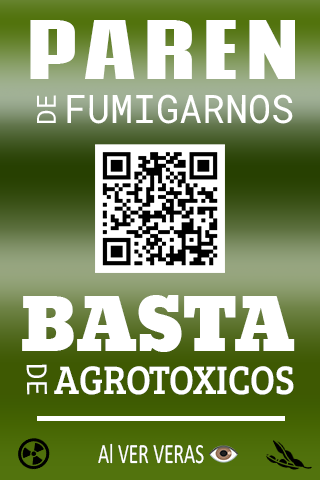
<style>
.page{position:relative;width:320px;height:480px;background:#ffffff}
.page>*{position:absolute;margin:0}
.t1{font:75.6px "CodaCaption-ExtraBold";color:#ffffff}
.t2{font:26.1px "RobotoMono-Regular";color:#ffffff}
.t3{font:39.2px "RobotoMono-Regular";color:#ffffff}
.t4{font:71.1px "Moul-Regular";color:#ffffff}
.t5{font:27.8px "RobotoMono-Regular";color:#ffffff}
.t6{font:41.1px "BreeSerif-Regular";color:#ffffff;scale:0.91 1}
.t7{font:28.1px "Calibri";color:#ffffff;scale:0.69 1}
</style>
<div class="page">
<p class="t1" style="left:30px;top:20px;width:265px;height:59px">PAREN</p>
<p class="t2" style="left:37px;top:95px;width:19px;height:28px;rotate:-90deg">DE</p>
<p class="t3" style="left:67px;top:94px;width:226px;height:30px">FUMIGARNOS</p>
<p class="t4" style="left:22px;top:295px;width:273px;height:57px">BASTA</p>
<p class="t5" style="left:26px;top:364px;width:21px;height:31px;rotate:89deg">DE</p>
<p class="t6" style="left:54px;top:366px;width:240px;height:29px">AGROTOXICOS</p>
<p class="t7" style="left:98px;top:443px;width:106px;height:21px">Al VER VERAS</p>
</div>
